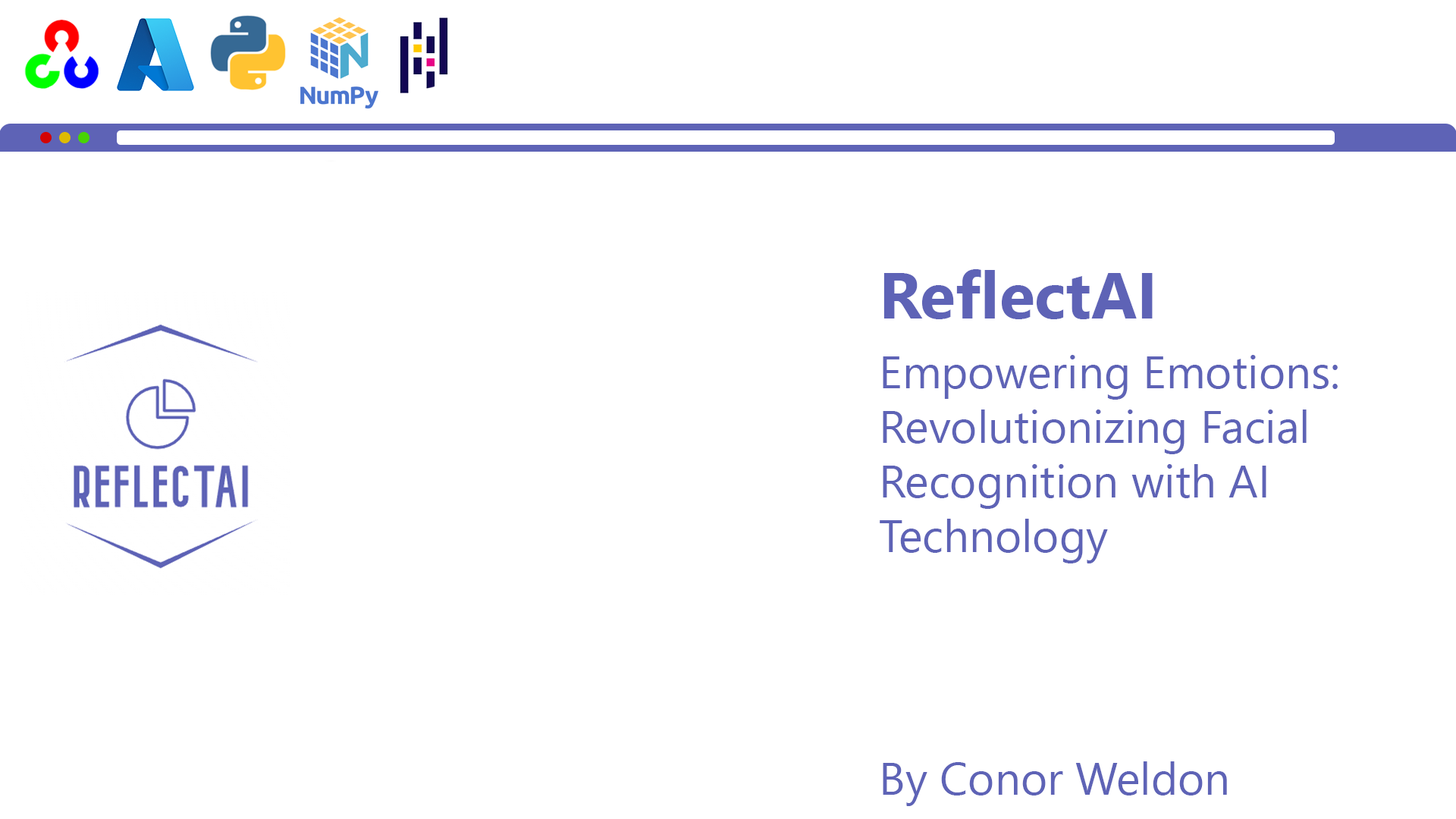
<style>
.page{position:relative;width:1456px;height:819px;background:#ffffff}
.page>*{position:absolute;margin:0}
.t1{font:65.2px "SegoeUI-Bold";color:#5e63b6}
.t2{font:45.5px "SegoeUI";color:#5e63b6}
</style>
<div class="page">
<p class="t1" style="left:883px;top:269px;width:270px;height:50px">ReflectAI</p>
<p class="t2" style="left:880px;top:355px;width:458px;height:208px">Empowering Emotions: Revolutionizing Facial Recognition with AI Technology</p>
<p class="t2" style="left:883px;top:761px;width:344px;height:45px">By Conor Weldon</p>
</div>
